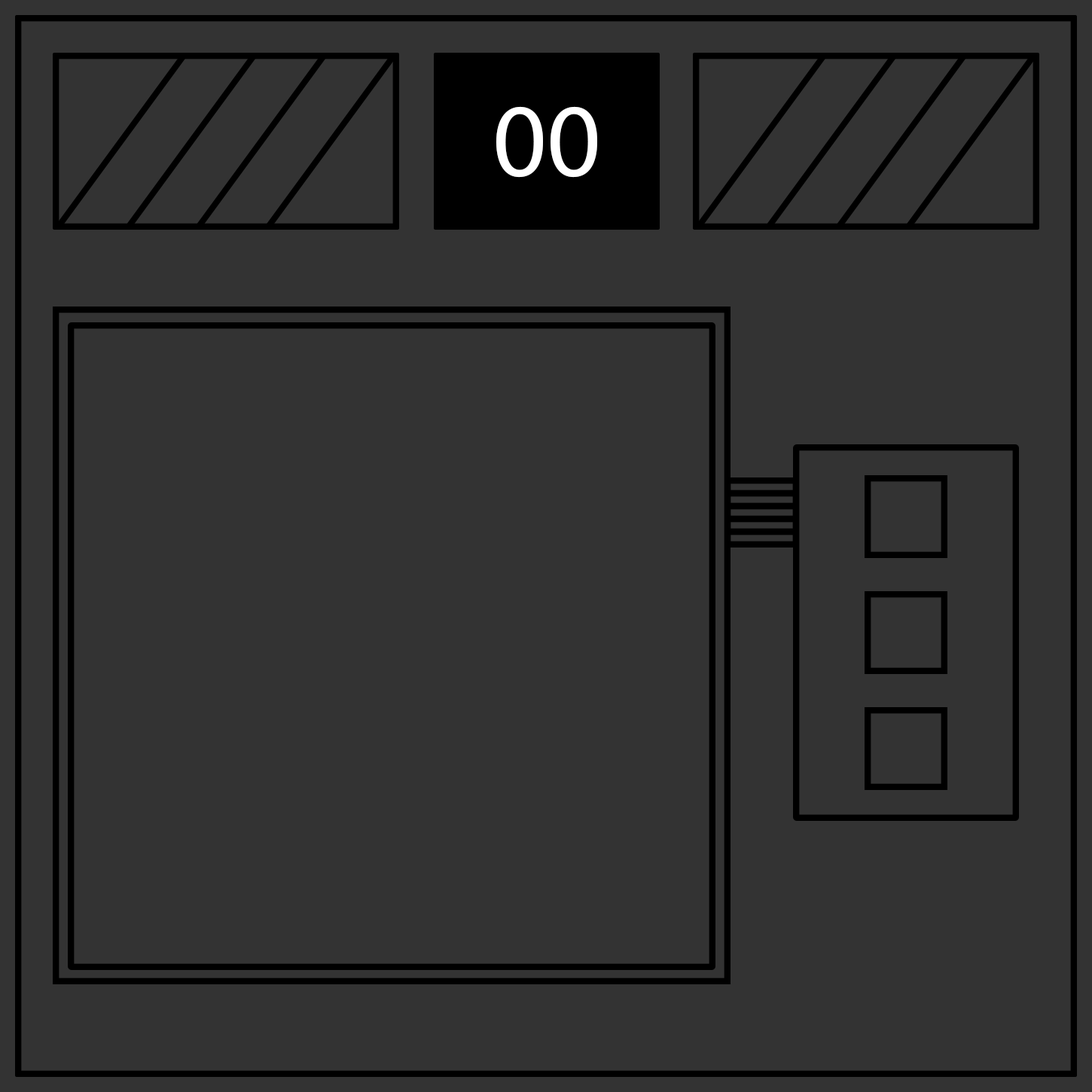
<style>
.page{position:relative;width:1092px;height:1092px;background:#333333}
.page>*{position:absolute;margin:0}
.t1{font:105.4px "MyriadPro-Regular";color:#ffffff}
</style>
<div class="page">
<p class="t1" style="left:496px;top:106px;width:101px;height:72px">00</p>
</div>
